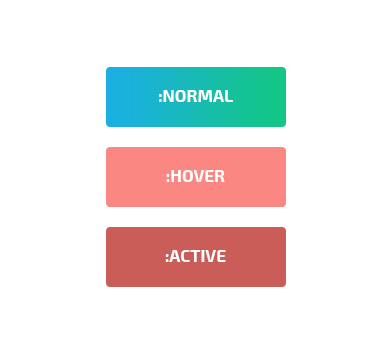
<style>
.page{position:relative;width:391px;height:353px;background:#ffffff}
.page>*{position:absolute;margin:0}
.t1{font:17px "Exo2-Bold";color:#ffffff;text-transform:uppercase}
</style>
<div class="page">
<p class="t1" style="left:159px;top:90px;width:74px;height:12px">:normal</p>
<p class="t1" style="left:166px;top:170px;width:59px;height:12px">:hover</p>
<p class="t1" style="left:165px;top:250px;width:61px;height:12px">:active</p>
</div>
